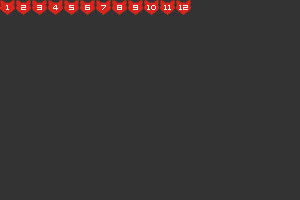
<style>
.page{position:relative;width:300px;height:200px;background:#333333}
.page>*{position:absolute;margin:0}
.t1{font:8px "04b08";color:#f8f8f8}
</style>
<div class="page">
<p class="t1" style="left:6px;top:5px;width:3px;height:5px">1</p>
<p class="t1" style="left:21px;top:5px;width:5px;height:5px">2</p>
<p class="t1" style="left:37px;top:5px;width:5px;height:5px">3</p>
<p class="t1" style="left:53px;top:5px;width:5px;height:5px">4</p>
<p class="t1" style="left:69px;top:5px;width:5px;height:5px">5</p>
<p class="t1" style="left:85px;top:5px;width:5px;height:5px">6</p>
<p class="t1" style="left:101px;top:5px;width:5px;height:5px">7</p>
<p class="t1" style="left:117px;top:5px;width:5px;height:5px">8</p>
<p class="t1" style="left:133px;top:5px;width:5px;height:5px">9</p>
<p class="t1" style="left:147px;top:5px;width:9px;height:5px">10</p>
<p class="t1" style="left:164px;top:5px;width:7px;height:5px">11</p>
<p class="t1" style="left:179px;top:5px;width:9px;height:5px">12</p>
</div>
